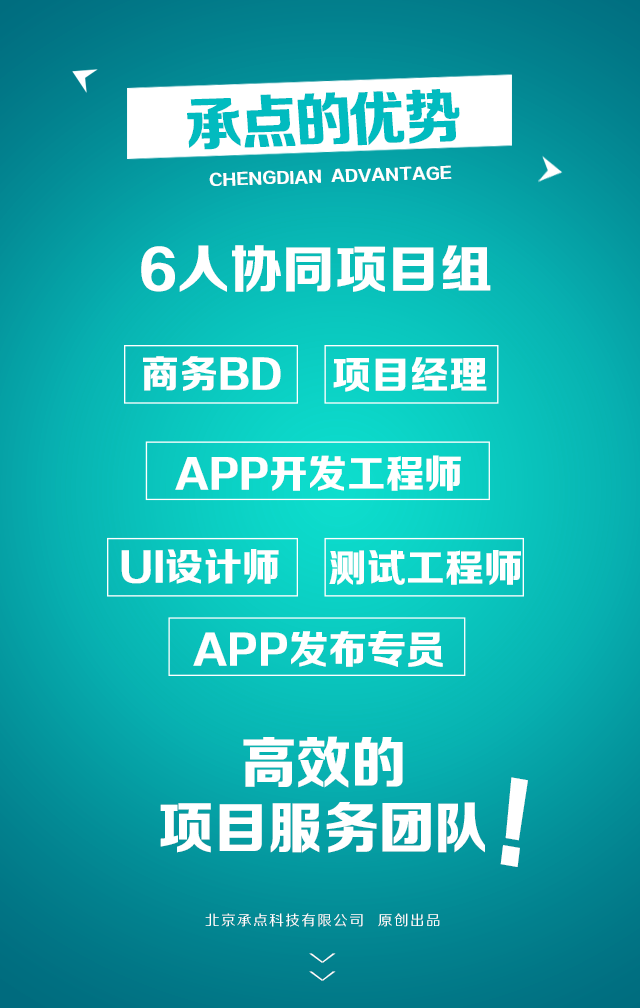
<style>
.page{position:relative;width:640px;height:1008px}
.page>*{position:absolute;margin:0}
.t1{font:59.2px "FZZDHJW--GB1-0";letter-spacing:-0.05em;color:#01bbbf;text-transform:uppercase}
.t2{font:15.6px "FZZDHJW--GB1-0";letter-spacing:0.005em;color:#ffffff;text-transform:uppercase}
.t3{font:51.9px "FZZDHJW--GB1-0";color:#ffffff;text-transform:uppercase}
.t4{font:38.6px "FZZDHJW--GB1-0";letter-spacing:0.005em;color:#ffffff;text-transform:uppercase}
.t5{font:39px "FZZDHJW--GB1-0";letter-spacing:0.005em;color:#ffffff;text-transform:uppercase}
.t6{font:39.6px "FZZDHJW--GB1-0";letter-spacing:0.005em;color:#ffffff;text-transform:uppercase}
.t7{font:56.2px/64.8px "FZZDHJW--GB1-0";color:#ffffff;text-transform:uppercase}
.t8{font:103.3px "FZZDHJW--GB1-0";letter-spacing:0.005em;color:#ffffff;text-transform:uppercase;scale:0.85 1}
.t9{font:14.2px "FZZHJW--GB1-0";letter-spacing:0.1em;color:#ffffff;text-transform:uppercase}
.t10{font:36.8px "FZZXHJW--GB1-0";letter-spacing:0.5em;color:#ffffff;text-transform:uppercase;scale:0.44 1}
</style>
<div class="page">
<p class="t1" style="left:187px;top:89px;width:273px;height:61px;rotate:-2deg">承点的优势</p>
<p class="t2" style="left:209px;top:165px;width:243px;height:21px;rotate:-2deg">CHENGDIAN  advantage</p>
<p class="t3" style="left:141px;top:245px;width:350px;height:47px">6人协同项目组</p>
<p class="t4" style="left:143px;top:356px;width:138px;height:35px">商务BD</p>
<p class="t4" style="left:333px;top:357px;width:154px;height:35px">项目经理</p>
<p class="t5" style="left:175px;top:455px;width:286px;height:36px">APP开发工程师</p>
<p class="t4" style="left:121px;top:549px;width:158px;height:35px">UI设计师</p>
<p class="t4" style="left:329px;top:550px;width:192px;height:35px">测试工程师</p>
<p class="t6" style="left:193px;top:631px;width:250px;height:36px">APP发布专员</p>
<p class="t7" style="left:160px;top:736px;width:325px;height:117px;text-align:center">高效的<br>项目服务团队</p>
<p class="t8" style="left:500px;top:777px;width:28px;height:90px;rotate:10deg">!</p>
<p class="t9" style="left:205px;top:913px;width:235px;height:14px">北京承点科技有限公司  原创出品</p>
<p class="t10" style="left:309px;top:953px;width:27px;height:28px;rotate:90deg">&gt;&gt;</p>
</div>
